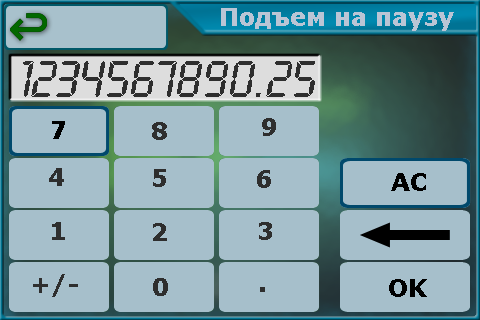
<style>
.page{position:relative;width:480px;height:320px;background:#a6bfcb}
.page>*{position:absolute;margin:0}
.t1{font:24px "Verdana-Bold";color:#bac5d5}
.t2{font:54px "LcdD";color:#2e2e2e}
.t3{font:24px "Verdana-Bold";color:#000000}
.t4{font:24px "Verdana-Bold";color:#2e2e2e}
</style>
<div class="page">
<p class="t1" style="left:221px;top:8px;width:233px;height:23px">Подъем на паузу</p>
<p class="t2" style="left:23px;top:61px;width:292px;height:36px">1234567890.25</p>
<p class="t3" style="left:52px;top:121px;width:13px;height:18px">7</p>
<p class="t4" style="left:152px;top:122px;width:15px;height:18px">8</p>
<p class="t4" style="left:262px;top:118px;width:14px;height:18px">9</p>
<p class="t4" style="left:49px;top:168px;width:15px;height:18px">4</p>
<p class="t4" style="left:153px;top:169px;width:13px;height:18px">5</p>
<p class="t4" style="left:257px;top:170px;width:14px;height:18px">6</p>
<p class="t3" style="left:391px;top:173px;width:35px;height:18px">AC</p>
<p class="t4" style="left:52px;top:222px;width:13px;height:18px">1</p>
<p class="t4" style="left:259px;top:222px;width:13px;height:18px">3</p>
<p class="t4" style="left:153px;top:223px;width:14px;height:18px">2</p>
<p class="t4" style="left:33px;top:274px;width:45px;height:23px">+/-</p>
<p class="t4" style="left:153px;top:278px;width:15px;height:18px">0</p>
<p class="t3" style="left:389px;top:279px;width:38px;height:18px">OK</p>
</div>
